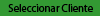
<style>
.page{position:relative;width:100px;height:16px;background:#339933}
.page>*{position:absolute;margin:0}
.t1{font:11px "MyriadPro-Regular";color:#000000}
</style>
<div class="page">
<p class="t1" style="left:8px;top:4px;width:85px;height:8px">Seleccionar Cliente</p>
</div>
